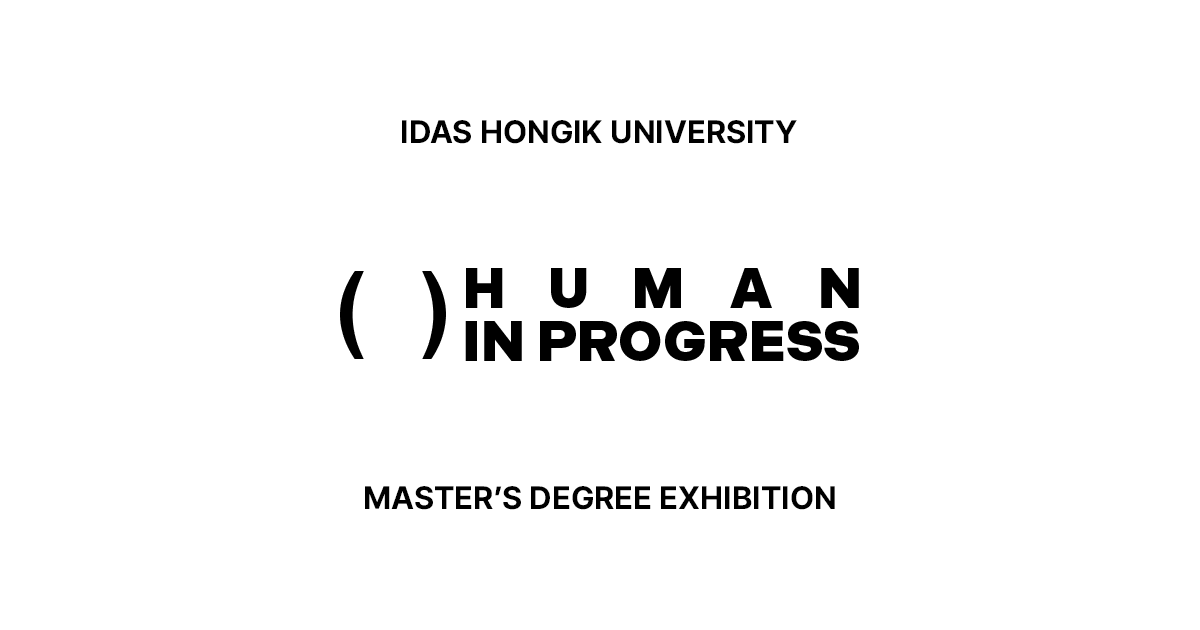
<style>
.page{position:relative;width:1200px;height:630px;background:#ffffff}
.page>*{position:absolute;margin:0}
.t1{font:32px "Pretendard-Bold";color:#000000}
.t2{font:56px "Indivisible-Black";color:#000000}
.t3{font:96px "Arial-BoldMT";letter-spacing:0.073em;color:#000000}
.t4{font:56px "Indivisible-Black";letter-spacing:0.004em;color:#000000}
</style>
<div class="page">
<p class="t1" style="left:402px;top:120px;width:395px;height:24px">IDAS HONGIK UNIVERSITY</p>
<p class="t2" style="left:466px;top:268px;width:37px;height:40px">H</p>
<p class="t2" style="left:551px;top:268px;width:36px;height:40px">U</p>
<p class="t2" style="left:635px;top:268px;width:46px;height:40px">M</p>
<p class="t2" style="left:730px;top:268px;width:42px;height:40px">A</p>
<p class="t2" style="left:821px;top:268px;width:38px;height:40px">N</p>
<p class="t3" style="left:340px;top:271px;width:24px;height:88px">(</p>
<p class="t3" style="left:422px;top:271px;width:24px;height:88px">)</p>
<p class="t4" style="left:465px;top:321px;width:394px;height:40px">IN PROGRESS</p>
<p class="t1" style="left:365px;top:486px;width:470px;height:24px">MASTER’S DEGREE EXHIBITION</p>
</div>
